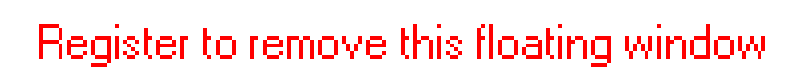
<style>
.page{position:relative;width:800px;height:80px;background:#ffffff}
.page>*{position:absolute;margin:0}
.t1{font:48px "W95FARegular";color:#ff0000}
</style>
<div class="page">
<p class="t1" style="left:39px;top:24px;width:726px;height:43px">Register to remove this floating window</p>
</div>
